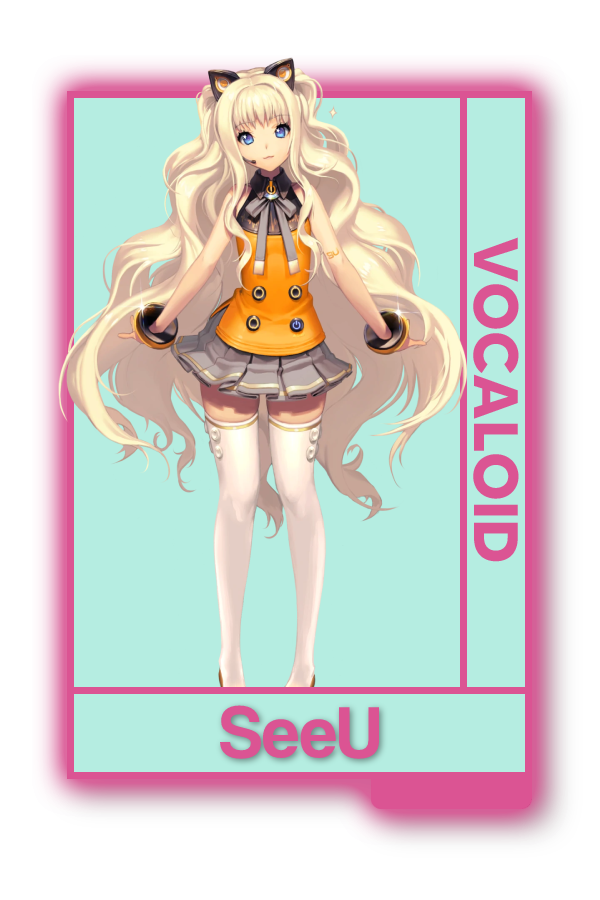
<style>
.page{position:relative;width:600px;height:900px;background:#b5ede1}
.page>*{position:absolute;margin:0}
.t1{font:62.5px "MADETOMMY-Bold";color:#db5493}
.t2{font:75px "CoolveticaRg-Regular";color:#db5493}
</style>
<div class="page">
<p class="t1" style="left:473px;top:237px;width:46px;height:325px;rotate:90deg">VOCALOID</p>
<p class="t2" style="left:220px;top:705px;width:160px;height:54px">SeeU</p>
</div>
